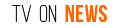
<style>
.page{position:relative;width:120px;height:26px;background:#ffffff}
.page>*{position:absolute;margin:0}
.t1{font:24px "BebasNeueLight";color:#000000}
.t2{font:24px "BebasNeueBold";letter-spacing:0.014em;color:#ff6600}
</style>
<div class="page">
<p class="t1" style="left:12px;top:5px;width:95px;height:17px">TV  ON  <span class="t2">NEWS</span></p>
</div>
